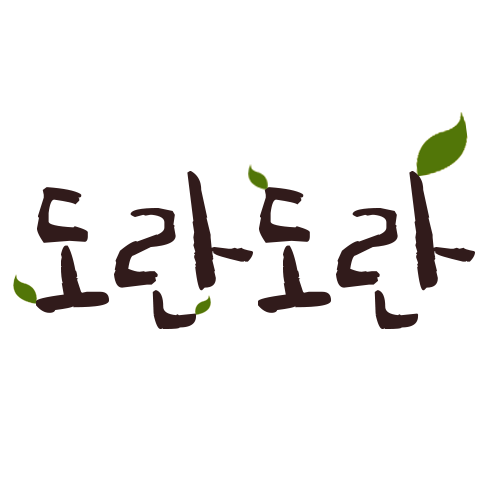
<style>
.page{position:relative;width:500px;height:500px;background:#ffffff}
.page>*{position:absolute;margin:0}
.t1{font:200px "SangSangFlowerRoad";color:#311b1b}
</style>
<div class="page">
<p class="t1" style="left:36px;top:171px;width:439px;height:158px">도란도란</p>
</div>
